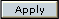
<style>
.page{position:relative;width:59px;height:19px;background:#c8d3db}
.page>*{position:absolute;margin:0}
.t1{font:10px "Verdana";color:#000000}
</style>
<div class="page">
<p class="t1" style="left:15px;top:5px;width:29px;height:10px">Apply</p>
</div>
